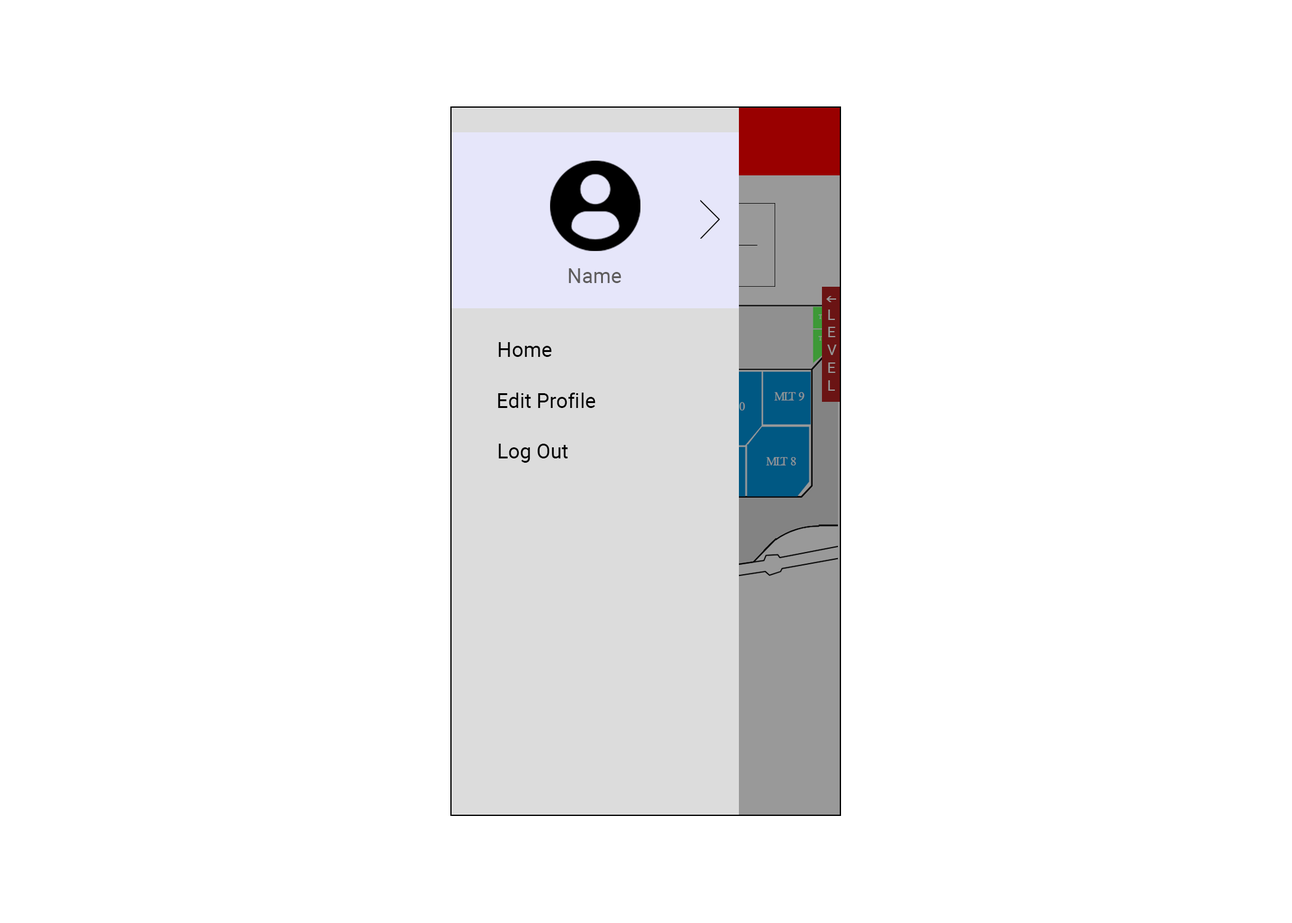
<style>
.page{position:relative;width:1292px;height:923px;background:#ffffff}
.page>*{position:absolute;margin:0}
.t1{font:20.5px "Roboto-Regular";color:#5e5c5c}
.t2{font:14.8px "Roboto-Regular";color:#989898}
.t3{font:20.5px "Roboto-Regular";color:#000000}
</style>
<div class="page">
<p class="t1" style="left:569px;top:268px;width:52px;height:15px">Name</p>
<p class="t2" style="left:827px;top:309px;width:10px;height:82px">L<br>E<br>V<br>E<br>L</p>
<p class="t3" style="left:498px;top:342px;width:54px;height:15px">Home</p>
<p class="t3" style="left:498px;top:393px;width:98px;height:15px">Edit Profile</p>
<p class="t3" style="left:498px;top:444px;width:70px;height:19px">Log Out</p>
</div>
